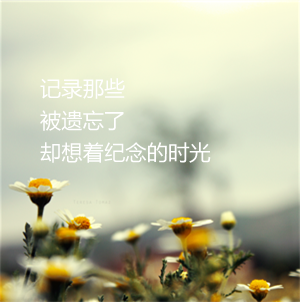
<style>
.page{position:relative;width:300px;height:302px}
.page>*{position:absolute;margin:0}
.t1{font:21.3px/32px "MicrosoftYaHei";color:#ffffff}
</style>
<div class="page">
<p class="t1" style="left:40px;top:78px;width:171px;height:85px">记录那些<br>被遗忘了<br>却想着纪念的时光</p>
</div>
